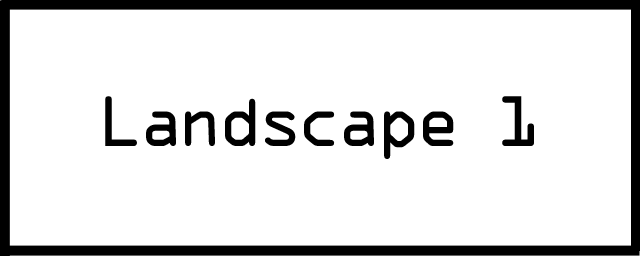
<style>
.page{position:relative;width:640px;height:256px;background:#ffffff}
.page>*{position:absolute;margin:0}
.t1{font:64px "OCRAStd";letter-spacing:-0.1em;color:#000000}
</style>
<div class="page">
<p class="t1" style="left:105px;top:96px;width:429px;height:63px">Landscape 1</p>
</div>
